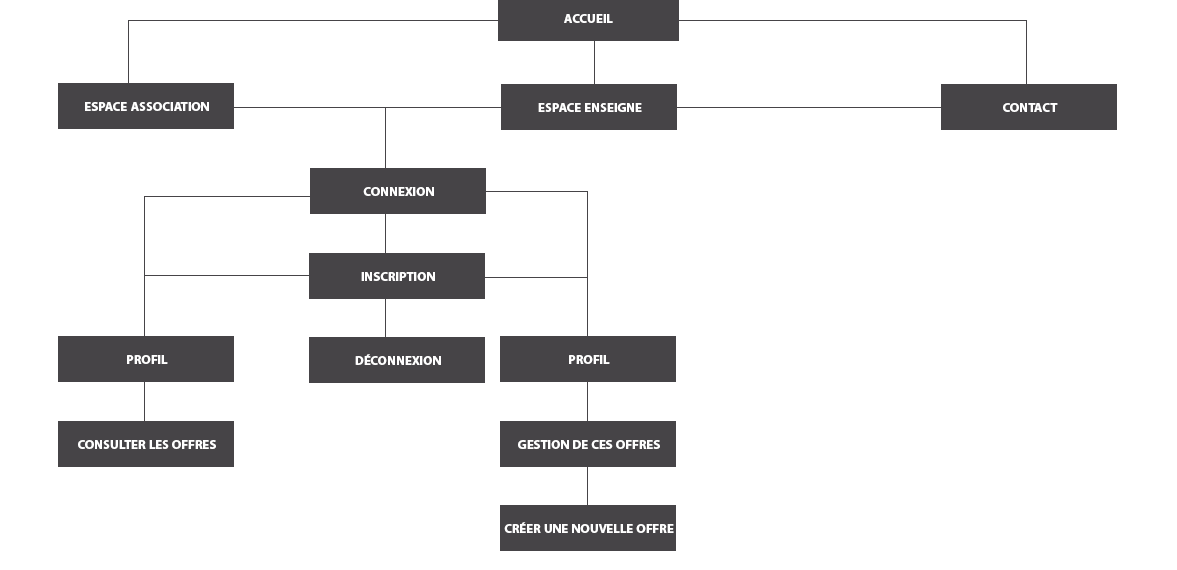
<style>
.page{position:relative;width:1177px;height:570px;background:#ffffff}
.page>*{position:absolute;margin:0}
.t1{font:18px "MyriadArabic-Bold";color:#ffffff}
</style>
<div class="page">
<p class="t1" style="left:564px;top:14px;width:49px;height:9px">ACCUEIL</p>
<p class="t1" style="left:85px;top:102px;width:124px;height:9px">ESPACE ASSOCIATION</p>
<p class="t1" style="left:538px;top:103px;width:104px;height:9px">ESPACE ENSEIGNE</p>
<p class="t1" style="left:1003px;top:103px;width:55px;height:9px">CONTACT</p>
<p class="t1" style="left:363px;top:187px;width:71px;height:9px">CONNEXION</p>
<p class="t1" style="left:361px;top:272px;width:74px;height:9px">INSCRIPTION</p>
<p class="t1" style="left:127px;top:355px;width:41px;height:9px">PROFIL</p>
<p class="t1" style="left:355px;top:354px;width:86px;height:11px">DÉCONNEXION</p>
<p class="t1" style="left:569px;top:355px;width:41px;height:9px">PROFIL</p>
<p class="t1" style="left:78px;top:440px;width:138px;height:9px">CONSULTER LES OFFRES</p>
<p class="t1" style="left:518px;top:440px;width:142px;height:9px">GESTION DE CES OFFRES</p>
<p class="t1" style="left:504px;top:522px;width:170px;height:11px">CRÉER UNE NOUVELLE OFFRE</p>
</div>
